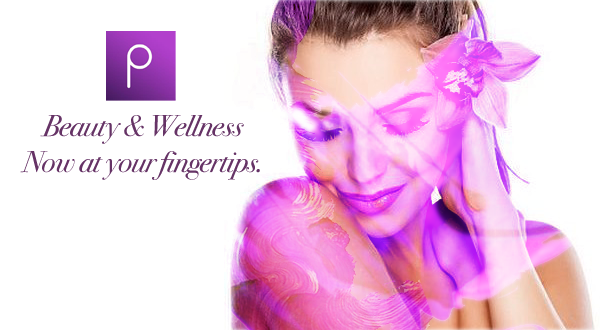
<style>
.page{position:relative;width:600px;height:330px;background:#ffffff}
.page>*{position:absolute;margin:0}
.t1{font:30px "BodoniSvtyTwoITCTT-BookIta";letter-spacing:-0.025em;color:#663366}
</style>
<div class="page">
<p class="t1" style="left:20px;top:115px;width:240px;height:65px;text-align:center">Beauty &amp; Wellness<br>Now at your fingertips.</p>
</div>
